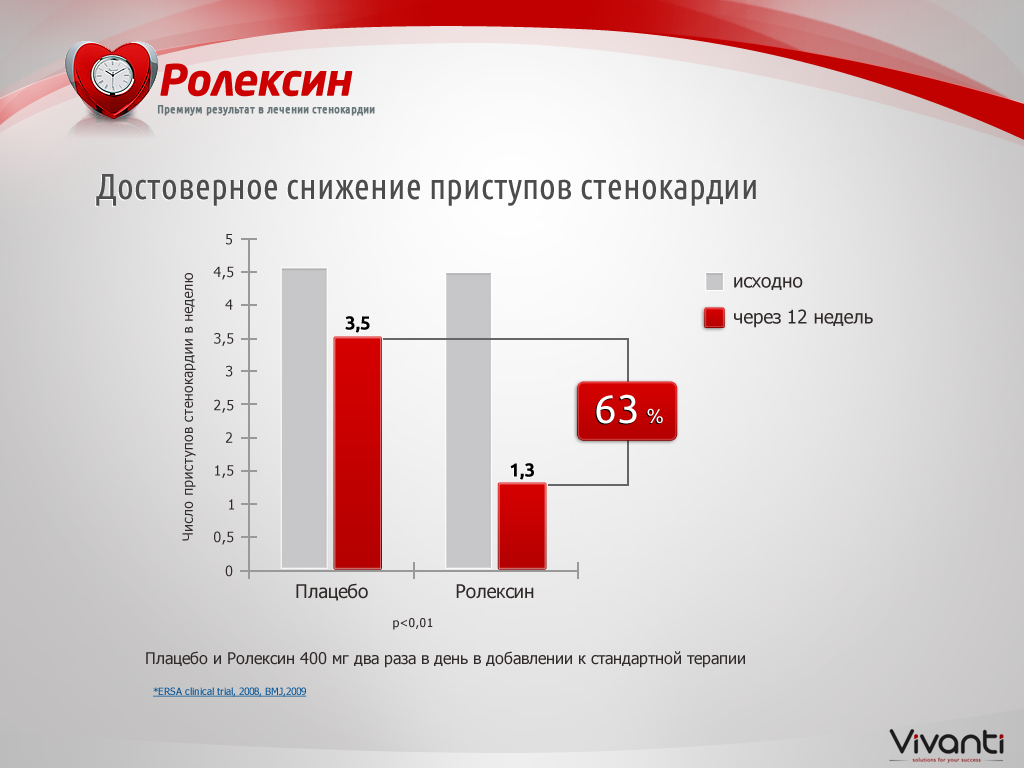
<style>
.page{position:relative;width:1024px;height:768px}
.page>*{position:absolute;margin:0}
.t1{font:43px "NeoSansPro-BoldItalic";letter-spacing:-0.015em;color:#cc0000}
.t2{font:12px "UbuntuCondensed-Regular";color:#677579;font-weight:bold}
.t3{font:36px "UbuntuCondensed-Regular";color:#4c4c4c}
.t4{font:14px "Tahoma";color:#312a2a}
.t5{font:18.7px "Tahoma";color:#312a2a}
.t6{font:18.7px "Ubuntu-Bold";color:#000000}
.t7{font:40px "Ubuntu";color:#ffffff}
.t8{font:20px "Ubuntu";color:#ffffff}
.t9{font:12px "Tahoma";color:#312a2a}
.t10{font:16px "Tahoma";color:#312a2a}
.t11{font:10px "Tahoma";color:#005399;text-decoration:underline}
</style>
<div class="page">
<p class="t1" style="left:160px;top:63px;width:193px;height:34px">Ролексин</p>
<p class="t2" style="left:157px;top:105px;width:218px;height:11px">Премиум результат в лечении стенокардии</p>
<p class="t3" style="left:96px;top:174px;width:660px;height:32px">Достоверное снижение приступов стенокардии</p>
<p class="t4" style="left:226px;top:234px;width:6px;height:11px">5</p>
<p class="t4" style="left:213px;top:266px;width:21px;height:14px">4,5</p>
<p class="t4" style="left:182px;top:273px;width:14px;height:268px;rotate:-90deg">Число приступов стенокардии в неделю</p>
<p class="t5" style="left:734px;top:277px;width:69px;height:13px">исходно</p>
<p class="t4" style="left:225px;top:299px;width:8px;height:11px">4</p>
<p class="t6" style="left:345px;top:316px;width:25px;height:17px">3,5</p>
<p class="t5" style="left:734px;top:309px;width:139px;height:19px">через 12 недель</p>
<p class="t4" style="left:214px;top:333px;width:20px;height:13px">3,5</p>
<p class="t4" style="left:226px;top:365px;width:7px;height:12px">3</p>
<p class="t4" style="left:214px;top:399px;width:20px;height:14px">2,5</p>
<p class="t7" style="left:596px;top:394px;width:41px;height:30px">63</p>
<p class="t8" style="left:647px;top:408px;width:16px;height:16px">%</p>
<p class="t4" style="left:226px;top:432px;width:7px;height:11px">2</p>
<p class="t4" style="left:215px;top:465px;width:19px;height:13px">1,5</p>
<p class="t6" style="left:510px;top:463px;width:24px;height:17px">1,3</p>
<p class="t4" style="left:229px;top:499px;width:5px;height:11px">1</p>
<p class="t4" style="left:214px;top:531px;width:20px;height:14px">0,5</p>
<p class="t4" style="left:225px;top:565px;width:8px;height:12px">0</p>
<p class="t5" style="left:296px;top:583px;width:72px;height:18px">Плацебо</p>
<p class="t5" style="left:456px;top:584px;width:78px;height:15px">Ролексин</p>
<p class="t9" style="left:393px;top:618px;width:40px;height:12px">р&lt;0,01</p>
<p class="t10" style="left:146px;top:651px;width:599px;height:17px">Плацебо и Ролексин 400 мг два раза в день в добавлении к стандартной терапии</p>
<p class="t11" style="left:153px;top:687px;width:154px;height:10px">*ERSA clinical trial, 2008, BMJ,2009</p>
</div>
